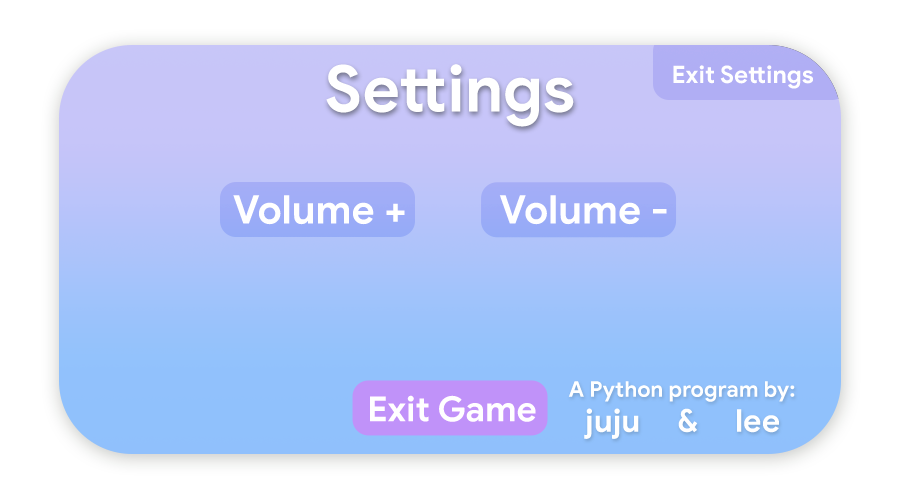
<style>
.page{position:relative;width:900px;height:500px;background:#ffffff}
.page>*{position:absolute;margin:0}
.t1{font:64.2px "GoogleSans-Bold";color:#ffffff}
.t2{font:24.1px "GoogleSans-Bold";color:#ffffff}
.t3{font:39.5px "GoogleSans-Bold";color:#ffffff}
.t4{font:21.7px "GoogleSans-Bold";color:#ffffff}
.t5{font:34.7px "GoogleSans-Bold";color:#ffffff}
.t6{font:31.6px "GoogleSans-Bold";color:#ffffff}
</style>
<div class="page">
<p class="t1" style="left:326px;top:64px;width:248px;height:63px">Settings</p>
<p class="t2" style="left:673px;top:65px;width:140px;height:24px">Exit Settings</p>
<p class="t3" style="left:233px;top:195px;width:172px;height:30px">Volume +</p>
<p class="t3" style="left:499px;top:195px;width:168px;height:30px">Volume -</p>
<p class="t4" style="left:568px;top:381px;width:227px;height:21px">A Python program by:</p>
<p class="t5" style="left:370px;top:395px;width:166px;height:27px">Exit Game</p>
<p class="t6" style="left:584px;top:408px;width:195px;height:31px">juju     &amp;     lee</p>
</div>
